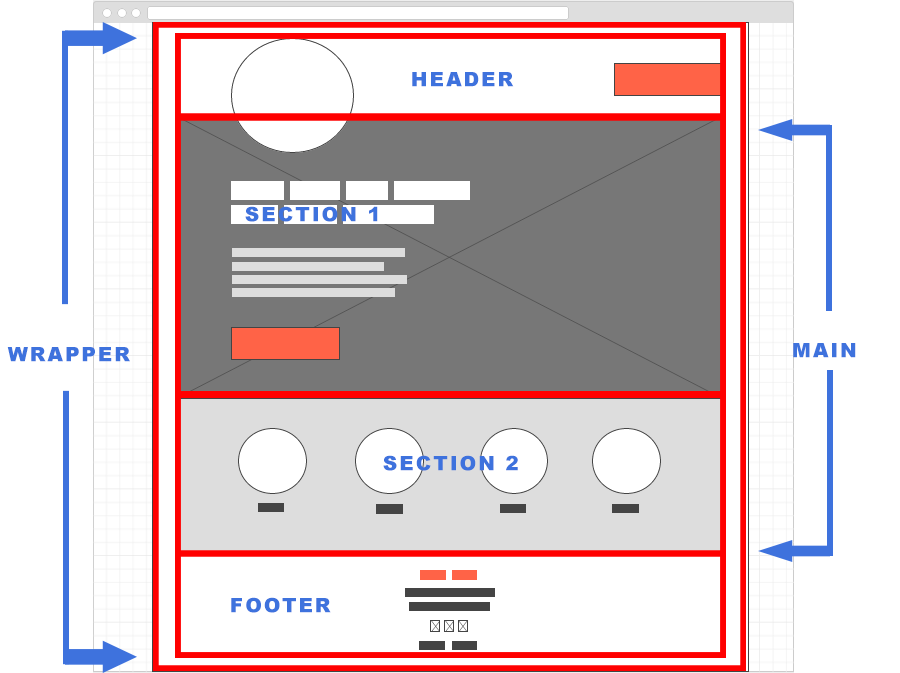
<style>
.page{position:relative;width:900px;height:673px;background:#ffffff}
.page>*{position:absolute;margin:0}
.t1{font:20px "Arial-Black";letter-spacing:0.1em;color:#3e72dd}
</style>
<div class="page">
<p class="t1" style="left:412px;top:72px;width:102px;height:15px">HEADER</p>
<p class="t1" style="left:245px;top:206px;width:133px;height:16px">SECTION 1</p>
<p class="t1" style="left:7px;top:347px;width:123px;height:15px">WRAPPER</p>
<p class="t1" style="left:793px;top:343px;width:63px;height:15px">MAIN</p>
<p class="t1" style="left:383px;top:455px;width:135px;height:16px">SECTION 2</p>
<p class="t1" style="left:231px;top:597px;width:100px;height:16px">FOOTER</p>
</div>
